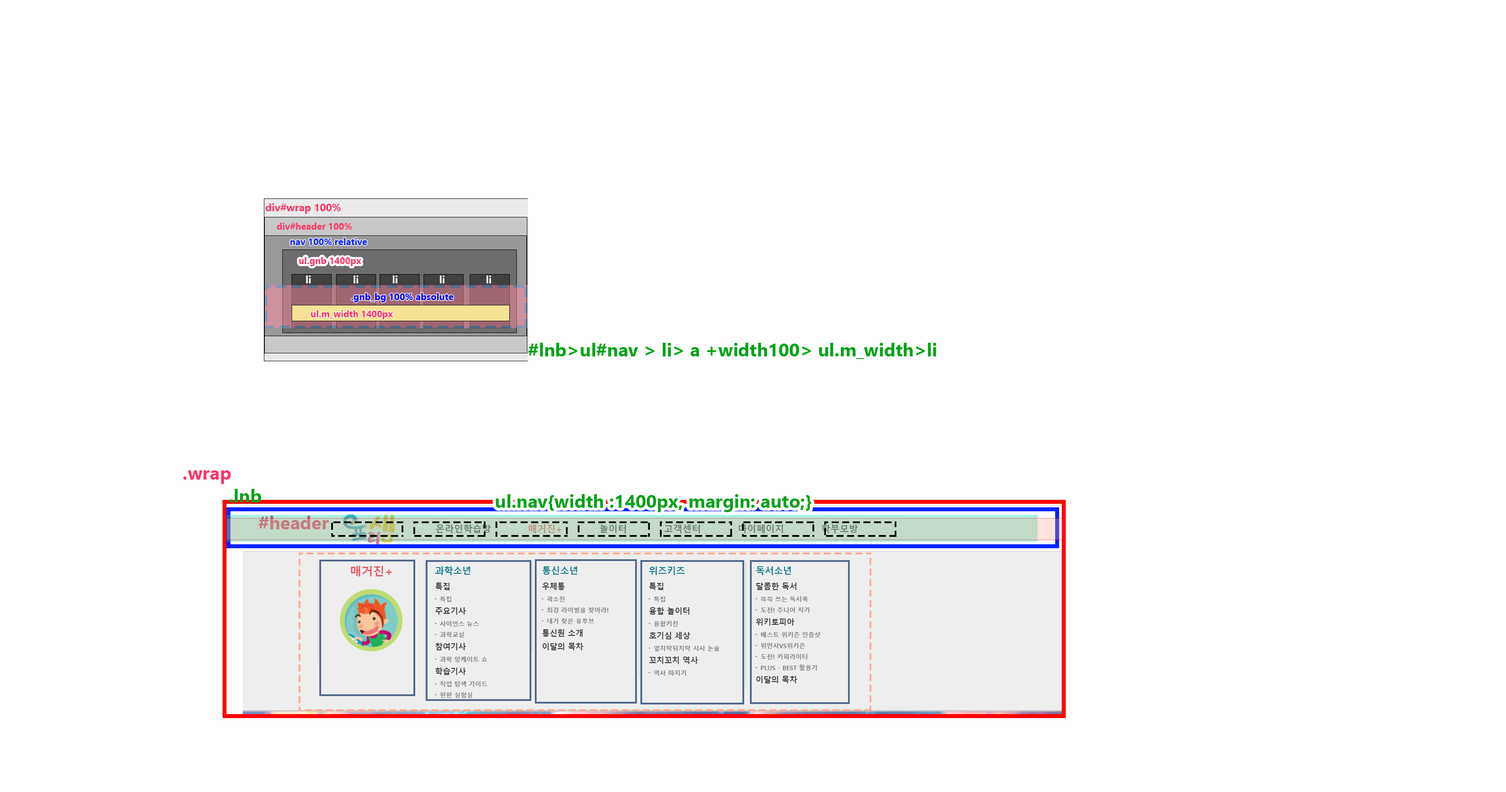
<style>
.page{position:relative;width:1506px;height:792px;background:#ffffff}
.page>*{position:absolute;margin:0}
.t1{font:10.4px "Ebrima-Bold";color:#ff3267}
.t2{font:9.3px "Ebrima-Bold";color:#ff3267}
.t3{font:9.3px "Ebrima-Bold";color:#0623ff}
.t4{font:10.6px "Ebrima-Bold";color:#f7f7f7}
.t5{font:9.4px "Ebrima-Bold";color:#0000ff}
.t6{font:9.2px "Ebrima-Bold";color:#ff3267}
.t7{font:18.5px "Ebrima-Bold";color:#00a217}
.t8{font:18.5px "Ebrima-Bold";color:#ff3267}
.t9{font:18.5px "Ebrima-Bold";color:#c47a82}
</style>
<div class="page">
<p class="t1" style="left:265px;top:203px;width:76px;height:11px">div#wrap 100%</p>
<p class="t2" style="left:277px;top:223px;width:75px;height:7px">div#header 100%</p>
<p class="t3" style="left:290px;top:238px;width:77px;height:7px">nav 100% relative</p>
<p class="t2" style="left:299px;top:257px;width:63px;height:9px">ul.gnb 1400px</p>
<p class="t4" style="left:306px;top:275px;width:5px;height:8px">li</p>
<p class="t4" style="left:354px;top:275px;width:4px;height:8px">li</p>
<p class="t4" style="left:393px;top:275px;width:5px;height:8px">li</p>
<p class="t4" style="left:440px;top:275px;width:5px;height:8px">li</p>
<p class="t4" style="left:486px;top:275px;width:5px;height:8px">li</p>
<p class="t5" style="left:351px;top:293px;width:102px;height:9px">.gnb_bg 100% absolute</p>
<p class="t6" style="left:311px;top:310px;width:82px;height:9px">ul.m_width 1400px</p>
<p class="t7" style="left:528px;top:343px;width:408px;height:16px">#lnb&gt;ul#nav &gt; li&gt; a +width100&gt; ul.m_width&gt;li</p>
<p class="t8" style="left:183px;top:470px;width:48px;height:14px">.wrap</p>
<p class="t7" style="left:229px;top:489px;width:32px;height:13px">.lnb</p>
<p class="t7" style="left:496px;top:494px;width:316px;height:18px">ul.nav{width :1400px, margin: auto;}</p>
<p class="t9" style="left:258px;top:516px;width:71px;height:13px">#header</p>
</div>
